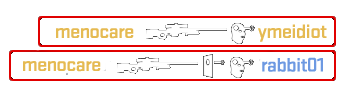
<style>
.page{position:relative;width:349px;height:98px;background:#ffffff}
.page>*{position:absolute;margin:0}
.t1{font:20px "Stratum2-Medium";letter-spacing:-0.05em;color:#e5ba52;font-weight:bold}
.t2{font:20px "Stratum2-Medium";letter-spacing:-0.05em;color:#6d99e2;font-weight:bold}
</style>
<div class="page">
<p class="t1" style="left:56px;top:28px;width:78px;height:11px">menocare</p>
<p class="t1" style="left:258px;top:24px;width:69px;height:18px">ymeidiot</p>
<p class="t1" style="left:23px;top:61px;width:78px;height:11px">menocare</p>
<p class="t2" style="left:262px;top:57px;width:61px;height:15px">rabbit01</p>
</div>
